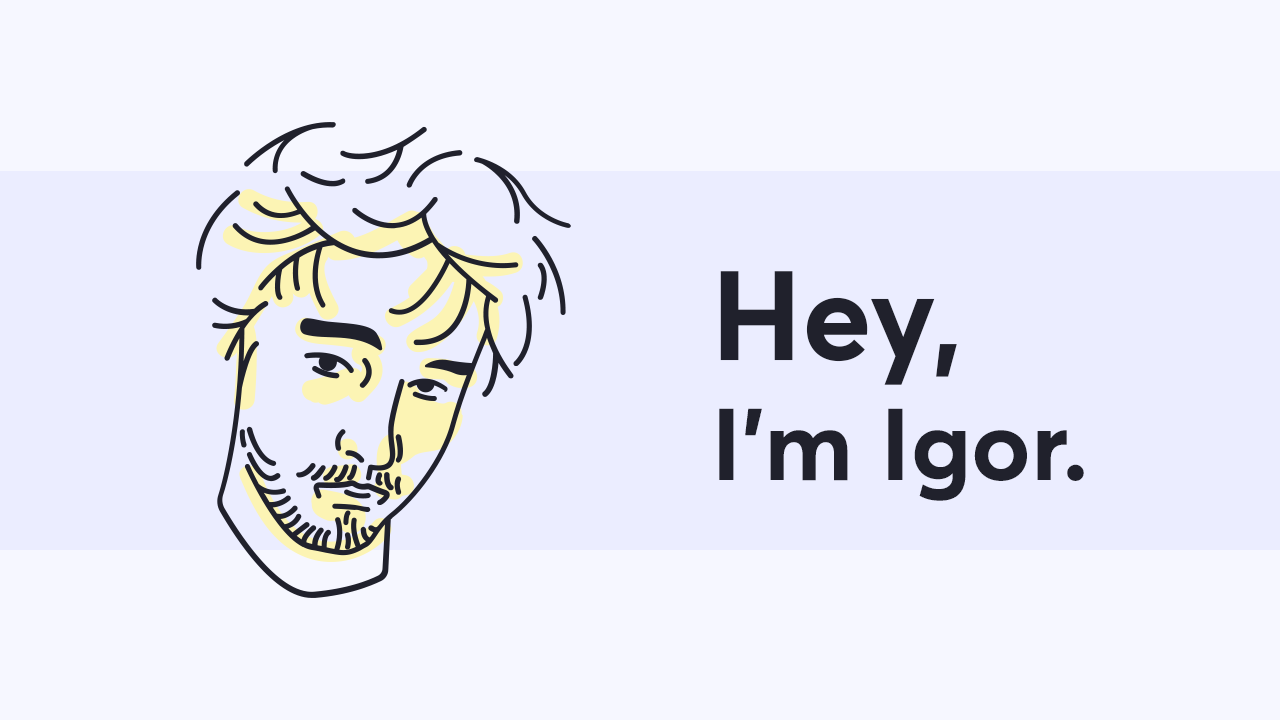
<style>
.page{position:relative;width:1280px;height:720px;background:#f6f7ff}
.page>*{position:absolute;margin:0}
.t1{font:100px "Averta-Bold";color:#20212c}
.t2{font:125px "Averta-Bold";color:#20212c}
</style>
<div class="page">
<p class="t1" style="left:719px;top:271px;width:365px;height:230px"><span class="t2">Hey,<br></span>I’m Igor.</p>
</div>
